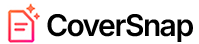
<style>
.page{position:relative;width:199px;height:44px;background:#ffffff}
.page>*{position:absolute;margin:0}
.t1{font:30px "Inter-SemiBold";letter-spacing:-0.05em;color:#000000}
</style>
<div class="page">
<p class="t1" style="left:47px;top:14px;width:146px;height:28px">CoverSnap</p>
</div>
